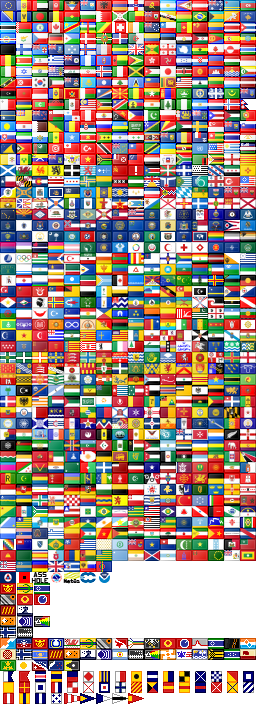
<style>
.page{position:relative;width:256px;height:715px}
.page>*{position:absolute;margin:0}
.t1{font:8px/6.7px "Us-Navy-Markings";color:#000000}
.t2{font:5.3px "DejaVuSansCode";color:#000000}
</style>
<div class="page">
<p class="t1" style="left:31px;top:572px;width:18px;height:12px;text-align:center">ass<br>hole</p>
<p class="t2" style="left:63px;top:579px;width:17px;height:5px">MetOz</p>
</div>
